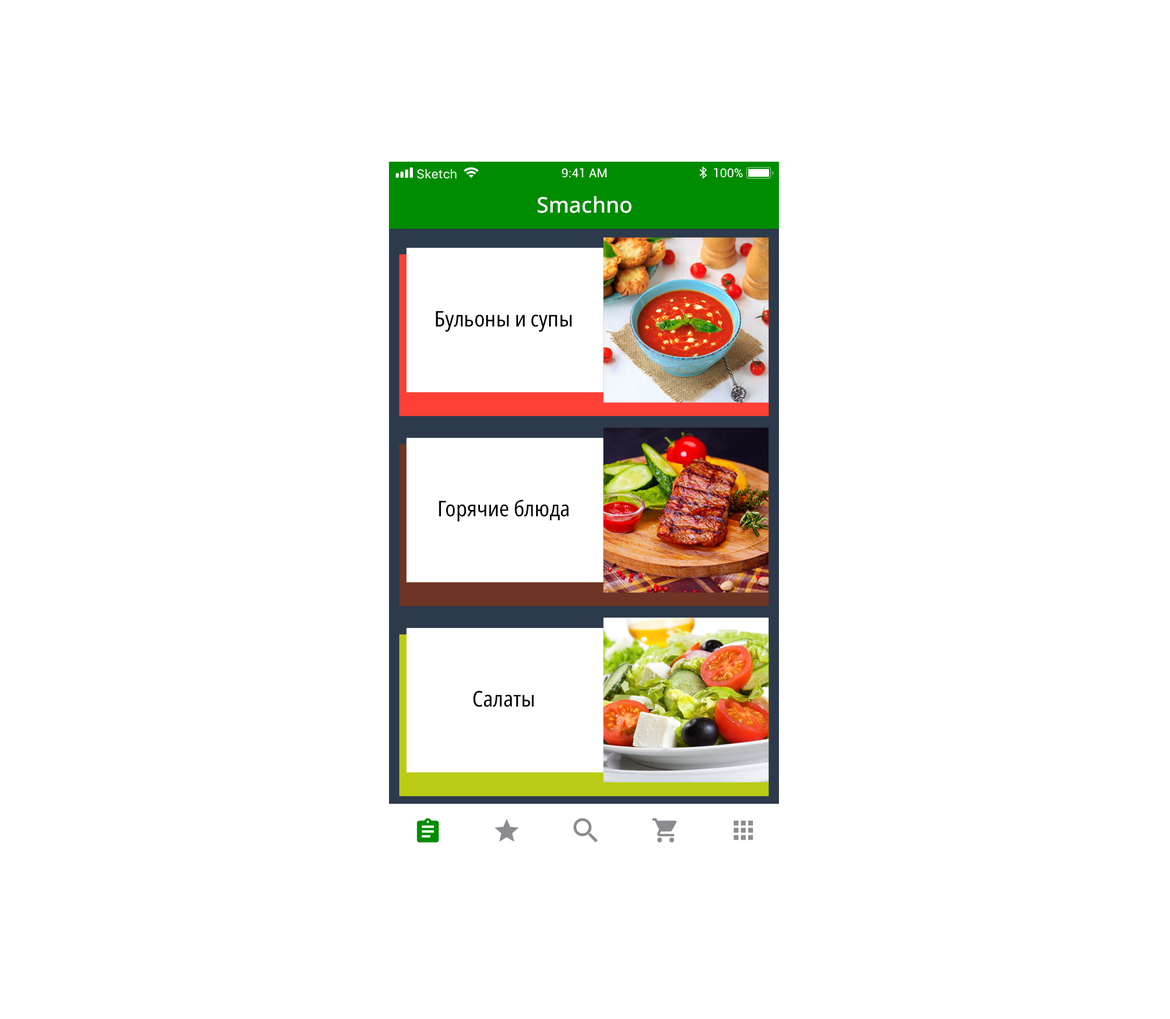
<style>
.page{position:relative;width:1170px;height:1019px;background:#ffffff}
.page>*{position:absolute;margin:0}
.t1{font:21.7px "NotoSans-Medium";color:#ffffff}
.t2{font:21.7px "NotoSans-Condensed";color:#000000}
</style>
<div class="page">
<p class="t1" style="left:538px;top:196px;width:94px;height:17px">Smachno</p>
<p class="t2" style="left:436px;top:311px;width:136px;height:21px">Бульоны и супы</p>
<p class="t2" style="left:439px;top:500px;width:130px;height:22px">Горячие блюда</p>
<p class="t2" style="left:473px;top:691px;width:61px;height:16px">Салаты</p>
</div>
